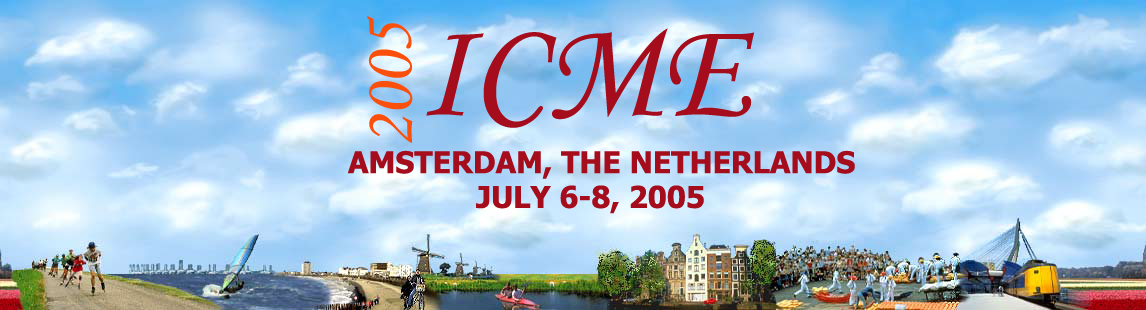
<style>
.page{position:relative;width:1146px;height:310px}
.page>*{position:absolute;margin:0}
.t1{font:72px "MonotypeCorsiva";color:#fb500c}
.t2{font:140px "MonotypeCorsiva";color:#a50d1c}
.t3{font:30px "Tahoma-Bold";color:#a50d1c}
</style>
<div class="page">
<p class="t1" style="left:367px;top:16px;width:46px;height:127px;rotate:-91deg">2005</p>
<p class="t2" style="left:426px;top:28px;width:329px;height:100px">ICME</p>
<p class="t3" style="left:347px;top:150px;width:508px;height:29px">AMSTERDAM, THE NETHERLANDS</p>
<p class="t3" style="left:476px;top:185px;width:228px;height:29px">JULY 6-8, 2005</p>
</div>
